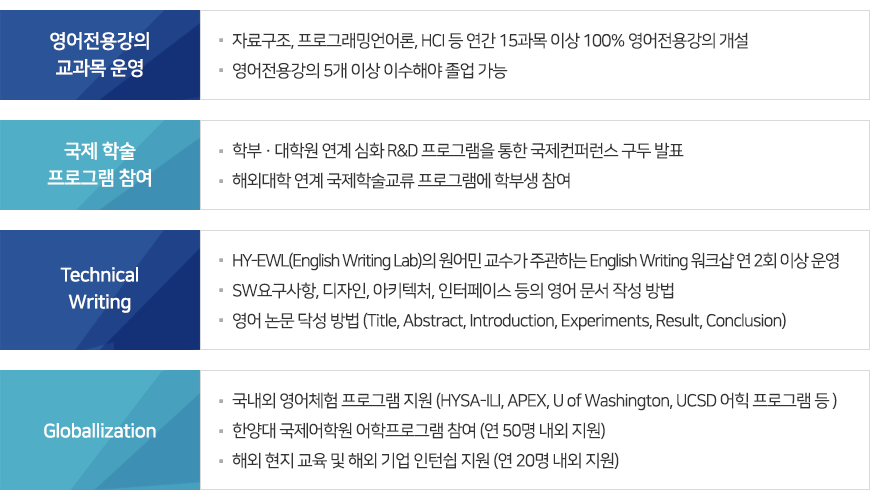
<style>
.page{position:relative;width:870px;height:500px;background:#ffffff}
.page>*{position:absolute;margin:0}
.t1{font:19px/27px "NanumSquareB";letter-spacing:-0.025em;color:#ffffff}
.t2{font:34px/30px "NanumSquareR";letter-spacing:-0.05em;color:#acacac}
.t3{font:17px/30px "NanumSquareR";letter-spacing:-0.05em;color:#333333}
.t4{font:17px/30px "NanumSquareR";letter-spacing:-0.075em;color:#333333}
.t5{font:19px "NanumSquareB";letter-spacing:-0.025em;color:#ffffff}
</style>
<div class="page">
<p class="t1" style="left:50px;top:32px;width:99px;height:46px;text-align:center">영어전용강의<br>교과목 운영</p>
<p class="t2" style="left:219px;top:38px;width:4px;height:34px">.<br>.</p>
<p class="t3" style="left:232px;top:32px;width:516px;height:47px">자료구조, 프로그래밍언어론, HCI 등 연간 15과목 이상 100% 영어전용강의 개설<br>영어전용강의 5개 이상 이수해야 졸업 가능</p>
<p class="t1" style="left:47px;top:141px;width:104px;height:46px;text-align:center">국제 학술<br>프로그램 참여</p>
<p class="t2" style="left:219px;top:149px;width:4px;height:34px">.<br>.</p>
<p class="t3" style="left:232px;top:142px;width:452px;height:47px">학부 · 대학원 연계 심화 R&amp;D 프로그램을 통한 국제컨퍼런스 구두 발표<br>해외대학 연계 국제학술교류 프로그램에 학부생 참여</p>
<p class="t3" style="left:233px;top:252px;width:606px;height:79px"><span class="t4">HY-EWL(English Writing Lab)의 원어민 교수가 주관하는 English Writing 워크샵 연 2회 이상 운영<br></span>SW요구사항, 디자인, 아키텍처, 인터페이스 등의 영어 문서 작성 방법<br>영어 논문 닥성 방법 (Title, Abstract, Introduction, Experiments, Result, Conclusion)</p>
<p class="t1" style="left:60px;top:267px;width:78px;height:46px;text-align:center">Technical<br>Writing</p>
<p class="t2" style="left:219px;top:258px;width:4px;height:64px">.<br>.<br>.</p>
<p class="t2" style="left:219px;top:399px;width:4px;height:64px">.<br>.<br>.</p>
<p class="t3" style="left:232px;top:392px;width:605px;height:77px">국내외 영어체험 프로그램 지원 (HYSA-ILI, APEX, U of Washington, UCSD 어힉 프로그램 등 )<br>한양대 국제어학원 어학프로그램 참여 (연 50명 내외 지원)<br>해외 현지 교육 및 해외 기업 인턴쉽 지원 (연 20명 내외 지원)</p>
<p class="t5" style="left:44px;top:423px;width:112px;height:15px">Globallization</p>
</div>
